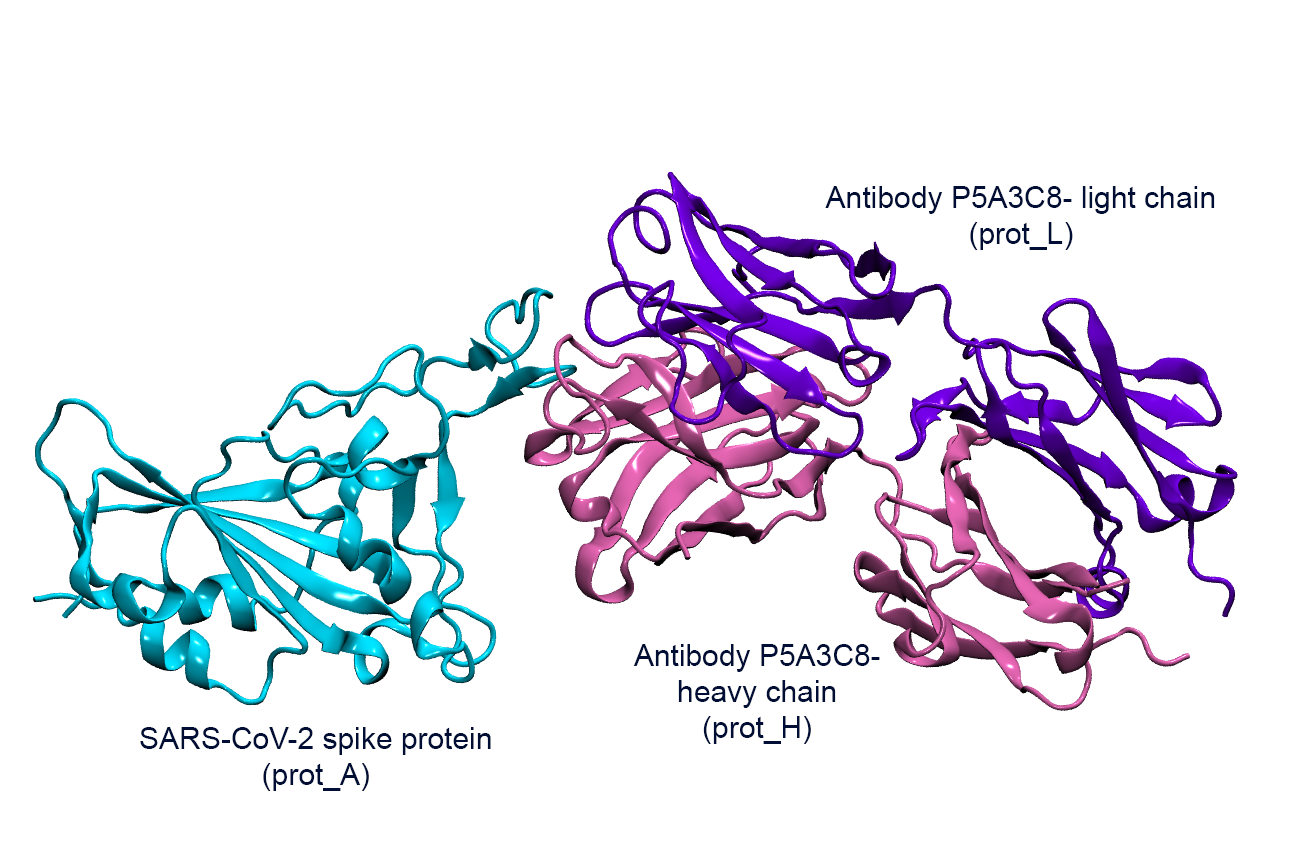
<style>
.page{position:relative;width:1291px;height:866px;background:#ffffff}
.page>*{position:absolute;margin:0}
.t1{font:30px "ArialMT";color:#000e36}
</style>
<div class="page">
<p class="t1" style="left:825px;top:186px;width:390px;height:64px;text-align:center">Antibody P5A3C8- light chain<br>(prot_L)</p>
<p class="t1" style="left:633px;top:644px;width:247px;height:100px;text-align:center">Antibody P5A3C8- heavy chain<br>(prot_H)</p>
<p class="t1" style="left:140px;top:727px;width:351px;height:64px;text-align:center">SARS-CoV-2 spike protein<br>(prot_A)</p>
</div>
